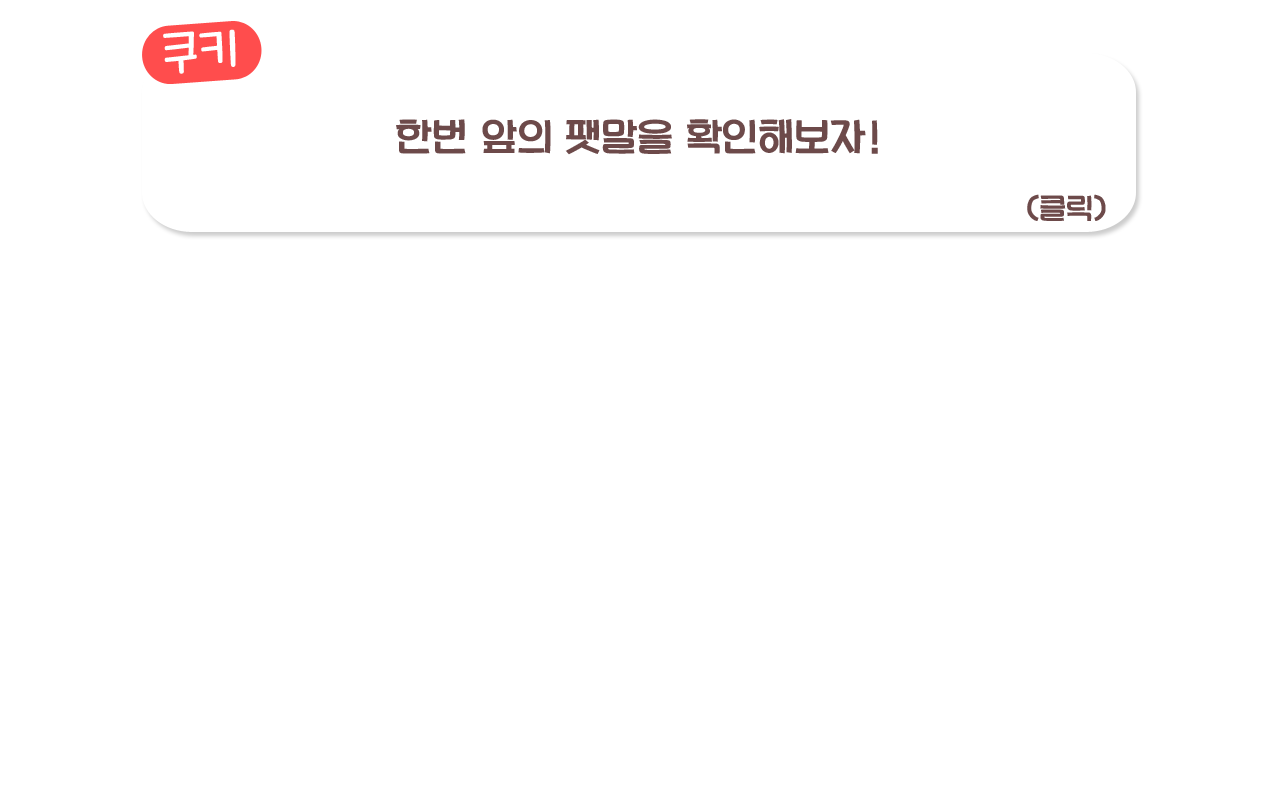
<style>
.page{position:relative;width:1280px;height:800px;background:#ffffff}
.page>*{position:absolute;margin:0}
.t1{font:48px "MaplestoryLight";color:#ffffff}
.t2{font:40px "ImcreSoojin_Regular";color:#6d4a4a}
.t3{font:30px "ImcreSoojin_Regular";color:#6d4a4a}
</style>
<div class="page">
<p class="t1" style="left:163px;top:29px;width:73px;height:45px;rotate:-4deg">쿠키</p>
<p class="t2" style="left:396px;top:119px;width:482px;height:36px">한번 앞의 팻말을 확인해보자!</p>
<p class="t3" style="left:1027px;top:194px;width:79px;height:27px">(클릭)</p>
</div>
